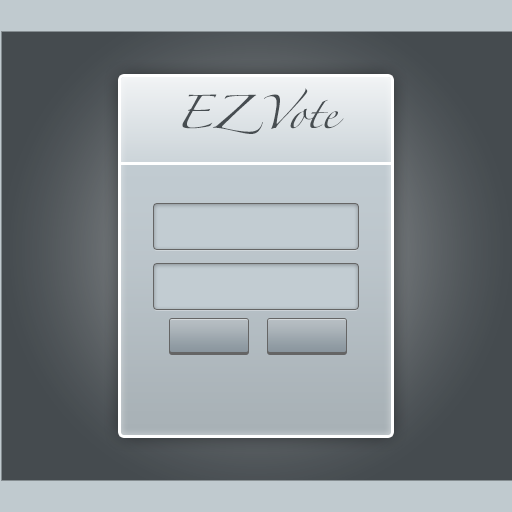
<style>
.page{position:relative;width:512px;height:512px}
.page>*{position:absolute;margin:0}
.t1{font:30px "Zapfino";color:#474d51}
</style>
<div class="page">
<p class="t1" style="left:182px;top:88px;width:162px;height:46px">EZ Vote</p>
</div>
